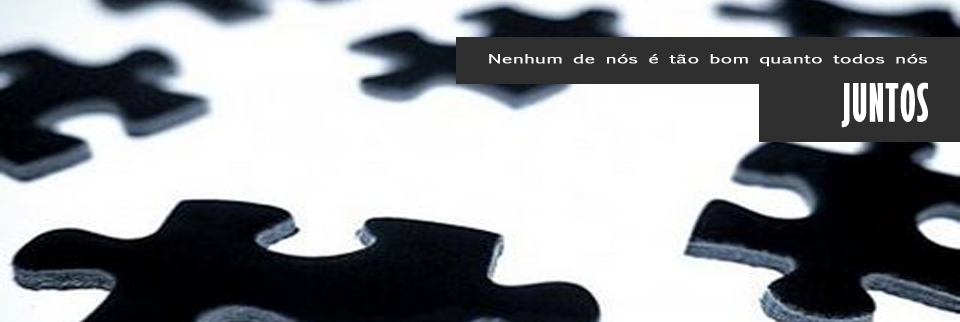
<style>
.page{position:relative;width:960px;height:322px}
.page>*{position:absolute;margin:0}
.t1{font:12px "EuphemiaCAS";color:#ffffff;font-weight:bold;scale:1.57 1}
.t2{font:48px "GillSansMT-ExtraCondensedBold";color:#ffffff;text-transform:uppercase;font-weight:bold}
</style>
<div class="page">
<p class="t1" style="left:489px;top:53px;width:438px;height:14px">Nenhum de nós é tão bom quanto todos nós</p>
<p class="t2" style="left:841px;top:82px;width:87px;height:46px">JUNTOS</p>
</div>
